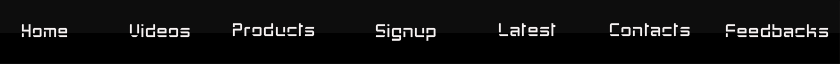
<style>
.page{position:relative;width:840px;height:64px;background:#0d0d0d}
.page>*{position:absolute;margin:0}
.t1{font:29px "GrayCat";color:#f8f4f4;scale:0.95 1}
.t2{font:29px "GrayCat";color:#f8f4f4}
</style>
<div class="page">
<p class="t1" style="left:21px;top:24px;width:47px;height:14px">Home</p>
<p class="t2" style="left:129px;top:24px;width:61px;height:14px">Videos</p>
<p class="t2" style="left:232px;top:23px;width:83px;height:14px">Products</p>
<p class="t2" style="left:375px;top:24px;width:61px;height:17px">Signup</p>
<p class="t2" style="left:498px;top:23px;width:58px;height:14px">Latest</p>
<p class="t2" style="left:609px;top:23px;width:81px;height:14px">Contacts</p>
<p class="t2" style="left:725px;top:24px;width:104px;height:14px">Feedbacks</p>
</div>
